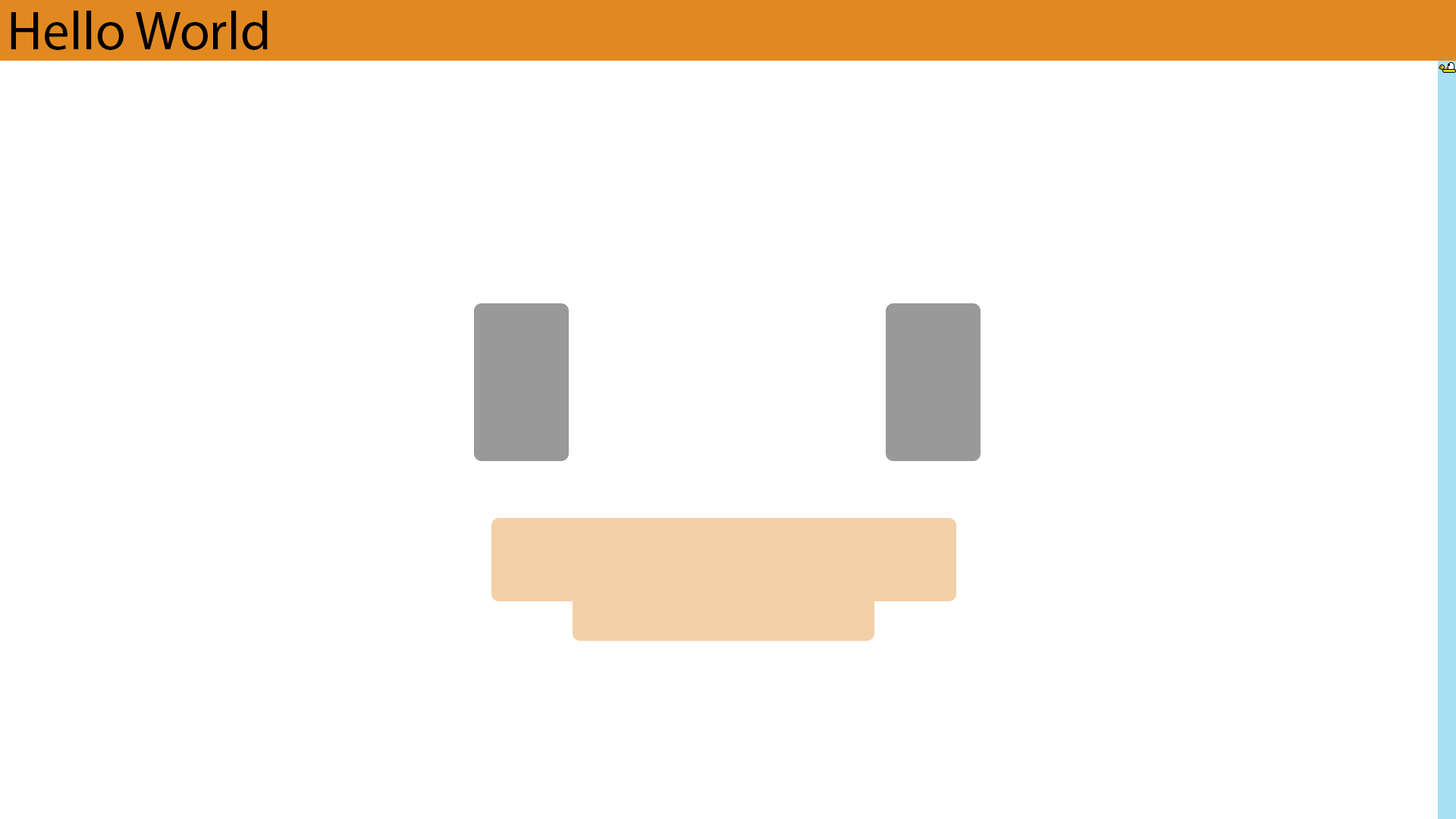
<style>
.page{position:relative;width:1456px;height:819px;background:#ffffff}
.page>*{position:absolute;margin:0}
.t1{font:54.6px "MyriadPro-Regular";color:#000000}
</style>
<div class="page">
<p class="t1" style="left:11px;top:11px;width:257px;height:39px">Hello World</p>
</div>
